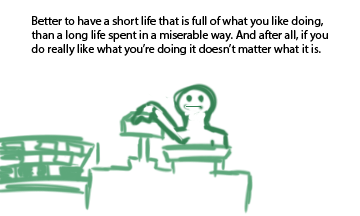
<style>
.page{position:relative;width:360px;height:216px;background:#ffffff}
.page>*{position:absolute;margin:0}
.t1{font:12px "MyriadPro-Regular";color:#000000}
</style>
<div class="page">
<p class="t1" style="left:31px;top:16px;width:297px;height:40px">Better to have a short life that is full of what you like doing, <br>than a long life spent in a miserable way. And after all, if you <br>do really like what you’re doing it doesn’t matter what it is.</p>
</div>
